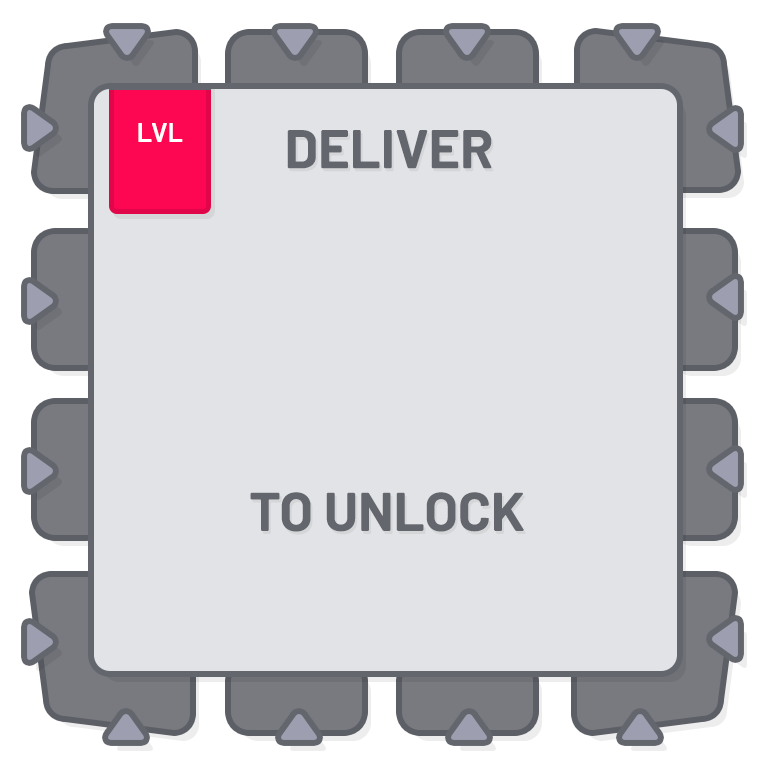
<style>
.page{position:relative;width:768px;height:768px;background:#e1e3e6}
.page>*{position:absolute;margin:0}
.t1{font:27px "Barlow-SemiBold";color:#ffffff}
.t2{font:54.2px "Barlow-Bold";color:#64666e}
</style>
<div class="page">
<p class="t1" style="left:138px;top:123px;width:45px;height:19px">LVL</p>
<p class="t2" style="left:287px;top:130px;width:205px;height:39px">DELIVER</p>
<p class="t2" style="left:250px;top:492px;width:274px;height:40px">TO UNLOCK</p>
</div>
